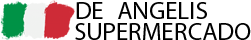
<style>
.page{position:relative;width:251px;height:40px;background:#ffffff}
.page>*{position:absolute;margin:0}
.t1{font:25px "MyriadPro-Regular";color:#000000}
</style>
<div class="page">
<p class="t1" style="left:76px;top:2px;width:27px;height:17px">DE</p>
<p class="t1" style="left:118px;top:2px;width:89px;height:17px">ANGELIS</p>
<p class="t1" style="left:75px;top:23px;width:176px;height:17px">SUPERMERCADO</p>
</div>
